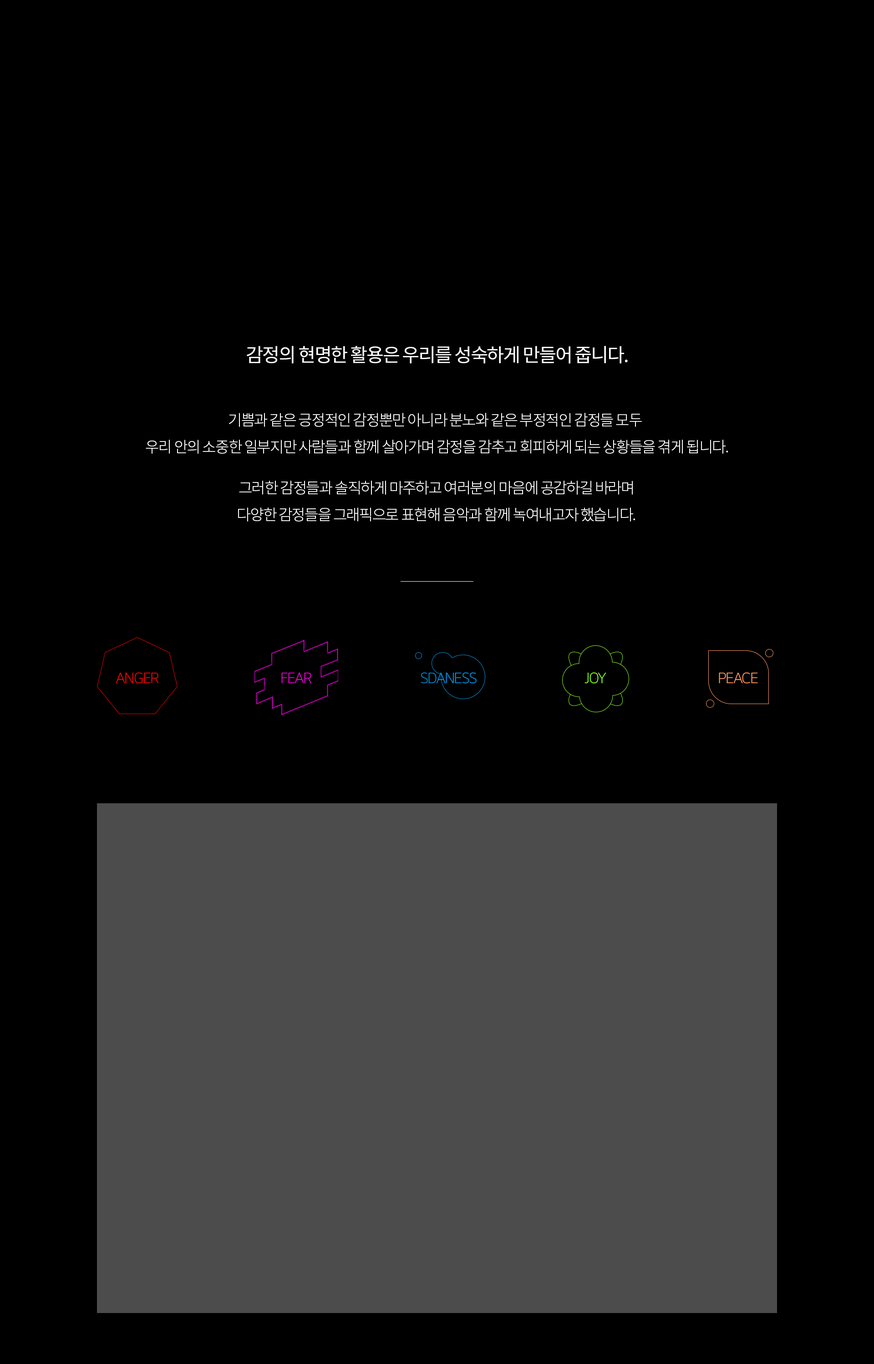
<style>
.page{position:relative;width:874px;height:1364px;background:#000000}
.page>*{position:absolute;margin:0}
.t1{font:19px "NotoSansKR-Regular";letter-spacing:-0.06em;color:#ffffff}
.t2{font:15.2px/26.7px "NotoSansKR-Light";letter-spacing:-0.06em;color:#ffffff}
</style>
<div class="page">
<p class="t1" style="left:247px;top:346px;width:381px;height:18px">감정의 현명한 활용은 우리를 성숙하게 만들어 줍니다.</p>
<p class="t2" style="left:146px;top:413px;width:582px;height:41px;text-align:center">기쁨과 같은 긍정적인 감정뿐만 아니라 분노와 같은 부정적인 감정들 모두 <br>우리 안의 소중한 일부지만 사람들과 함께 살아가며 감정을 감추고 회피하게 되는 상황들을 겪게 됩니다.</p>
<p class="t2" style="left:238px;top:481px;width:397px;height:41px;text-align:center">그러한 감정들과 솔직하게 마주하고 여러분의 마음에 공감하길 바라며<br>다양한 감정들을 그래픽으로 표현해 음악과 함께 녹여내고자 했습니다.</p>
</div>
